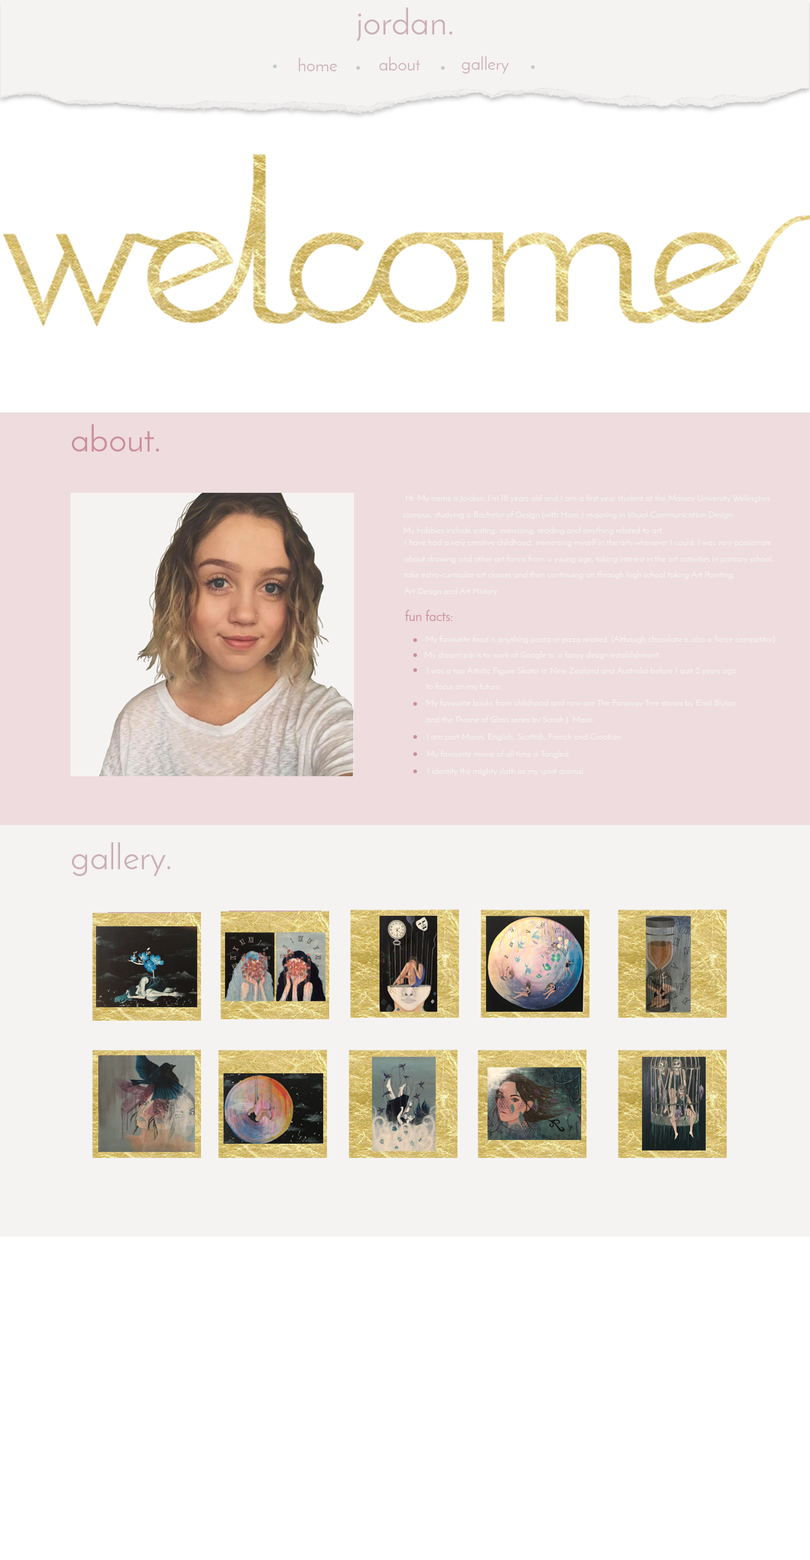
<style>
.page{position:relative;width:810px;height:1560px;background:#ffffff}
.page>*{position:absolute;margin:0}
.t1{font:36px "JosefinSans";color:#caaeb5}
.t2{font:18px "JosefinSans";color:#caaeb5}
.t3{font:36px "JosefinSans";color:#ca8c9b}
.t4{font:9px/16.2px "JosefinSans";color:#f5f3f2}
.t5{font:13.5px "JosefinSans";color:#ca8c9b}
.t6{font:9px "JosefinSans";color:#f5f3f2}
</style>
<div class="page">
<p class="t1" style="left:356px;top:8px;width:96px;height:33px">jordan.</p>
<p class="t2" style="left:298px;top:58px;width:40px;height:13px">home</p>
<p class="t2" style="left:379px;top:56px;width:42px;height:14px">about</p>
<p class="t2" style="left:461px;top:56px;width:48px;height:18px">gallery</p>
<p class="t3" style="left:71px;top:424px;width:88px;height:28px">about.</p>
<p class="t4" style="left:403px;top:494px;width:367px;height:41px;text-align:justify">Hi. My name is Jordan. I’m 18 years old and I am a first year student at the Massey University Wellington <br>campus, studying a Bachelor of Design (with Hons.) majoring in Visual Communication Design. <br>My hobbies include eating, exercising, reading and anything related to art.</p>
<p class="t4" style="left:404px;top:538px;width:369px;height:58px;text-align:justify">I have had a very creative childhood, immersing myself in the arts whenever I could. I was very passionate <br>about drawing and other art forms from a young age, taking interest in the art activities in primary school, <br>take extra-curricular art classes and then continuing on through high school taking Art Painting, <br>Art Design and Art History.</p>
<p class="t5" style="left:405px;top:610px;width:47px;height:11px">fun facts:</p>
<p class="t6" style="left:426px;top:635px;width:351px;height:9px">My favourite food is anything pasta or pizza related. (Although chocolate is also a fierce competitor).</p>
<p class="t6" style="left:424px;top:651px;width:236px;height:8px">My dream job is to work at Google or a fancy design establishment.</p>
<p class="t4" style="left:426px;top:667px;width:310px;height:24px;text-align:justify">I was a top Artistic Figure Skater in New Zealand and Australia before I quit 2 years ago <br>to focus on my future.</p>
<p class="t4" style="left:426px;top:699px;width:310px;height:25px;text-align:justify">My favourite books from childhood and now are The Faraway Tree stories by Enid Blyton <br>and the Throne of Glass series by Sarah J. Maas.</p>
<p class="t6" style="left:427px;top:733px;width:195px;height:8px">I am part Maori, English, Scottish, French and Croatian.</p>
<p class="t6" style="left:427px;top:750px;width:144px;height:8px">My favourite movie of all time is Tangled.</p>
<p class="t6" style="left:428px;top:767px;width:157px;height:9px">I identify the mighty sloth as my spirit animal.</p>
<p class="t1" style="left:71px;top:842px;width:99px;height:34px">gallery.</p>
</div>
